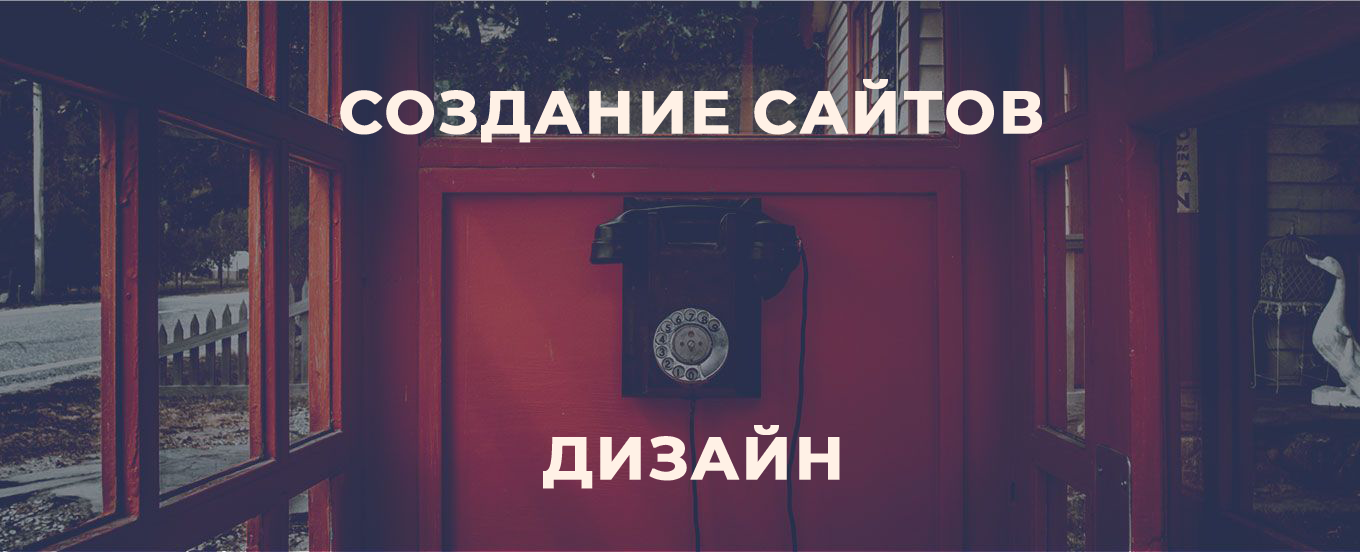
<style>
.page{position:relative;width:1360px;height:552px}
.page>*{position:absolute;margin:0}
.t1{font:60px "Montserrat-Bold";letter-spacing:0.025em;color:#fff1e6;text-transform:uppercase;font-weight:bold}
</style>
<div class="page">
<p class="t1" style="left:340px;top:79px;width:702px;height:64px">создание сайтов</p>
<p class="t1" style="left:543px;top:425px;width:297px;height:64px">дизайн</p>
</div>
